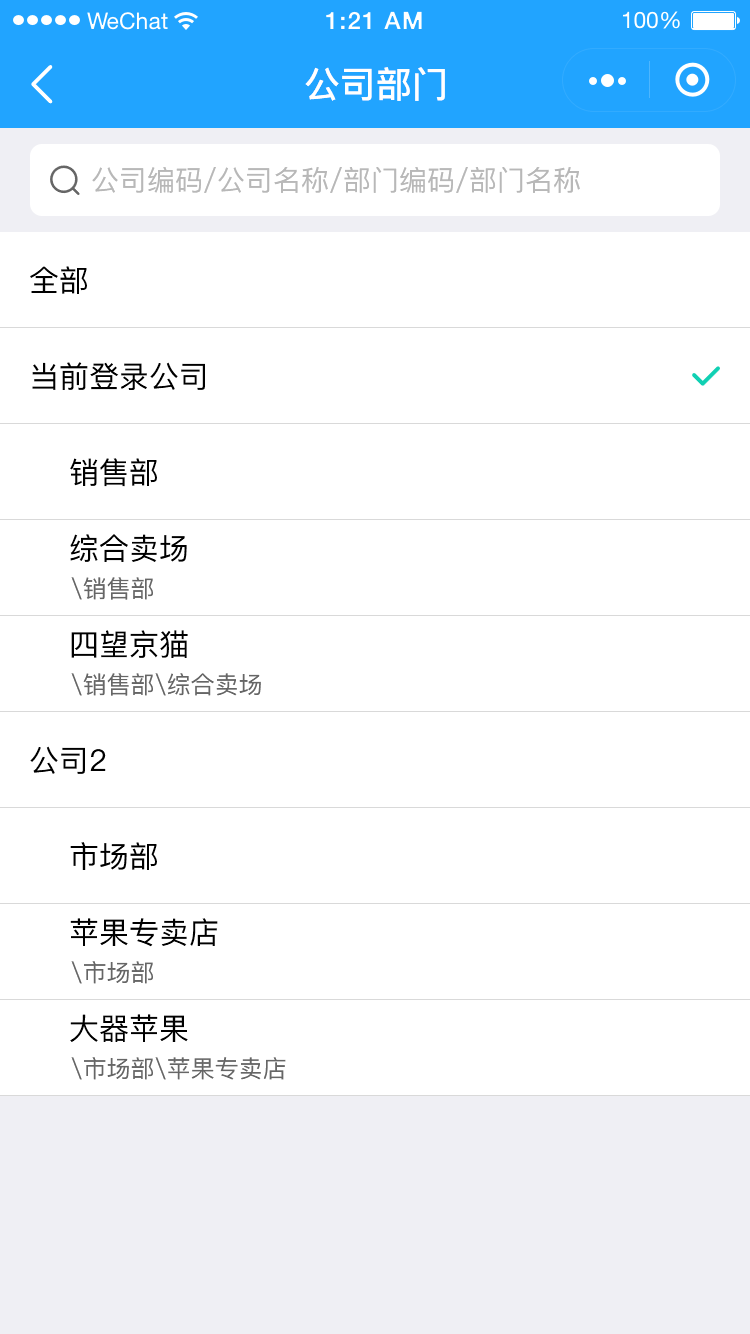
<style>
.page{position:relative;width:750px;height:1334px;background:#ffffff}
.page>*{position:absolute;margin:0}
.t1{font:36px "PingFang-SC-Bold";color:#ffffff}
.t2{font:28px "PingFang-SC-Medium";color:#b8b8b8}
.t3{font:30px "PingFang-SC-Medium";color:#000000}
.t4{font:24px "PingFang-SC-Medium";color:#666666}
</style>
<div class="page">
<p class="t1" style="left:305px;top:67px;width:140px;height:34px">公司部门</p>
<p class="t2" style="left:92px;top:167px;width:488px;height:26px">公司编码/公司名称/部门编码/部门名称</p>
<p class="t3" style="left:30px;top:266px;width:57px;height:28px">全部</p>
<p class="t3" style="left:32px;top:362px;width:173px;height:28px">当前登录公司</p>
<p class="t3" style="left:70px;top:458px;width:87px;height:29px">销售部</p>
<p class="t3" style="left:70px;top:534px;width:117px;height:28px">综合卖场</p>
<p class="t4" style="left:71px;top:577px;width:82px;height:23px">\销售部</p>
<p class="t3" style="left:71px;top:630px;width:117px;height:28px">四望京猫</p>
<p class="t4" style="left:71px;top:673px;width:190px;height:23px">\销售部\综合卖场</p>
<p class="t3" style="left:30px;top:746px;width:76px;height:28px">公司2</p>
<p class="t3" style="left:70px;top:842px;width:87px;height:28px">市场部</p>
<p class="t3" style="left:70px;top:918px;width:148px;height:29px">苹果专卖店</p>
<p class="t4" style="left:71px;top:961px;width:82px;height:23px">\市场部</p>
<p class="t3" style="left:70px;top:1014px;width:118px;height:28px">大器苹果</p>
<p class="t4" style="left:71px;top:1057px;width:215px;height:23px">\市场部\苹果专卖店</p>
</div>
